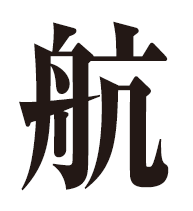
<style>
.page{position:relative;width:193px;height:211px;background:#ffffff}
.page>*{position:absolute;margin:0}
.t1{font:182.4px "RyuminPro-ExBold";letter-spacing:-0.1em;color:#231815;scale:0.89 1}
</style>
<div class="page">
<p class="t1" style="left:19px;top:21px;width:150px;height:170px">航</p>
</div>
